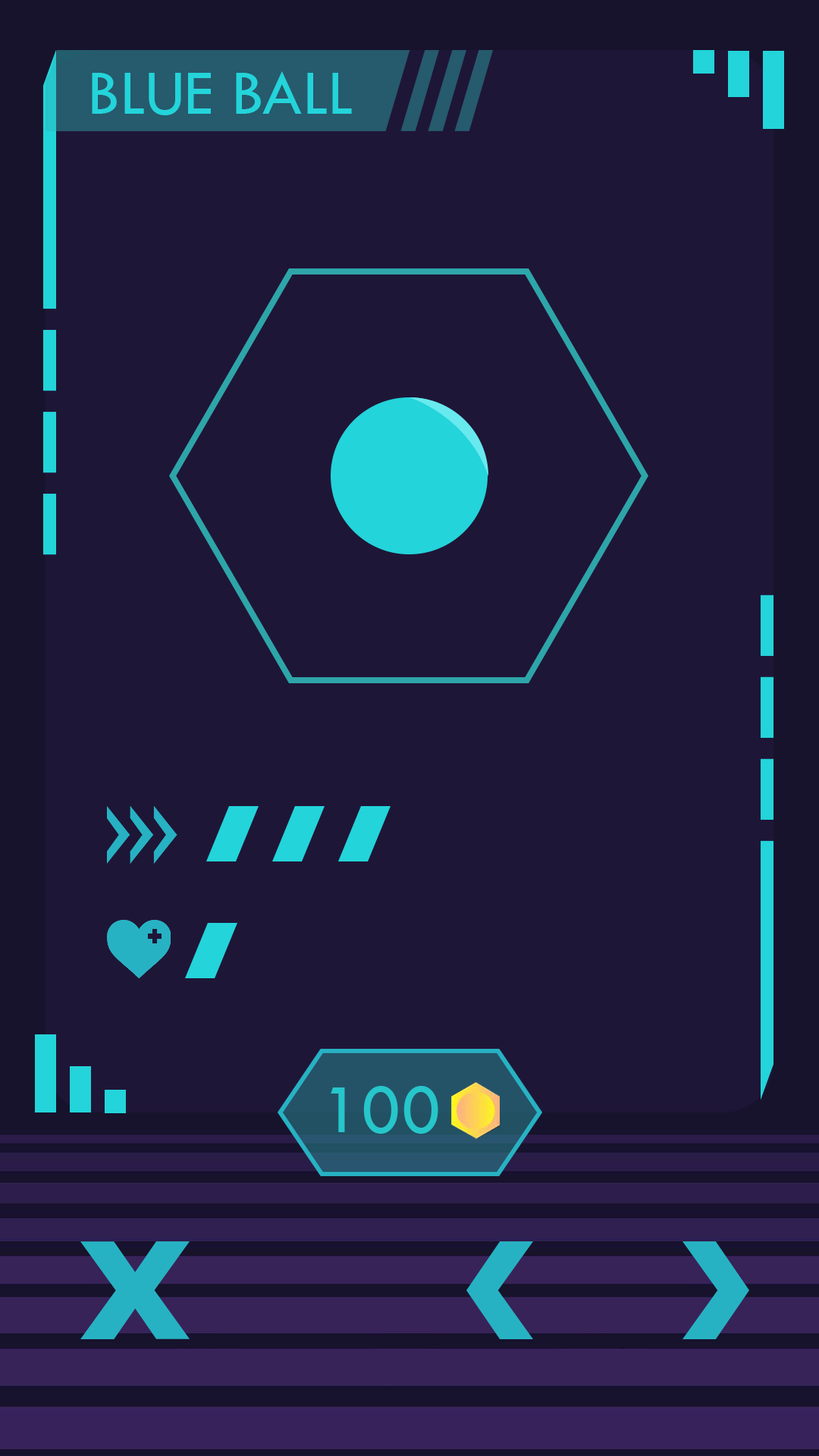
<style>
.page{position:relative;width:819px;height:1456px;background:#1e1637}
.page>*{position:absolute;margin:0}
.t1{font:65.7px "TwCenMT-Regular";color:#23d4da;text-transform:uppercase}
.t2{font:72.3px "TwCenMT-Regular";color:#26c6cb}
</style>
<div class="page">
<p class="t1" style="left:92px;top:71px;width:260px;height:44px">Blue Ball</p>
<p class="t2" style="left:331px;top:1086px;width:107px;height:48px">100</p>
</div>
